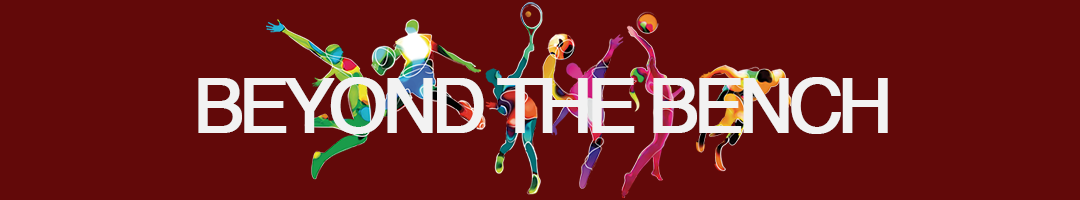
<style>
.page{position:relative;width:1080px;height:200px;background:#620909}
.page>*{position:absolute;margin:0}
.t1{font:75px "Helvetica";letter-spacing:-0.09em;color:#f2f2f2;font-weight:bold}
</style>
<div class="page">
<p class="t1" style="left:198px;top:77px;width:690px;height:57px">BEYOND THE BENCH</p>
</div>
